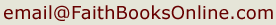
<style>
.page{position:relative;width:276px;height:25px;background:#e5e5d8}
.page>*{position:absolute;margin:0}
.t1{font:18px "Verdana";letter-spacing:0.01em;color:#660000}
</style>
<div class="page">
<p class="t1" style="left:4px;top:5px;width:269px;height:16px">email@FaithBooksOnline.com</p>
</div>
